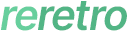
<style>
.page{position:relative;width:128px;height:31px;background:#ffffff}
.page>*{position:absolute;margin:0}
.t1{font:42.8px "Inter-SemiBoldItalic";letter-spacing:-0.04em;color:#52b585}
.t2{font:42.8px "Inter-SemiBoldItalic";letter-spacing:-0.04em;color:#67cf9d}
</style>
<div class="page">
<p class="t1" style="left:1px;top:1px;width:126px;height:30px"><span class="t2">re</span>retro</p>
</div>
